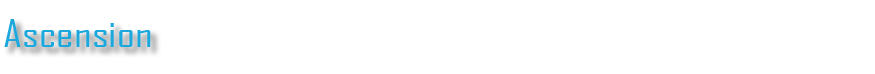
<style>
.page{position:relative;width:875px;height:74px;background:#ffffff}
.page>*{position:absolute;margin:0}
.t1{font:36.1px "AgencyFB-Reg";color:#1ca8dd;scale:1.3 1}
</style>
<div class="page">
<p class="t1" style="left:4px;top:19px;width:147px;height:28px">Ascension</p>
</div>
